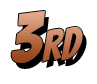
<style>
.page{position:relative;width:97px;height:84px;background:#ffffff}
.page>*{position:absolute;margin:0}
.t1{font:43.6px "Bangers-Regular"}
</style>
<div class="page">
<p class="t1" style="left:42px;top:27px;width:41px;height:35px;rotate:-5deg">rd</p>
</div>
